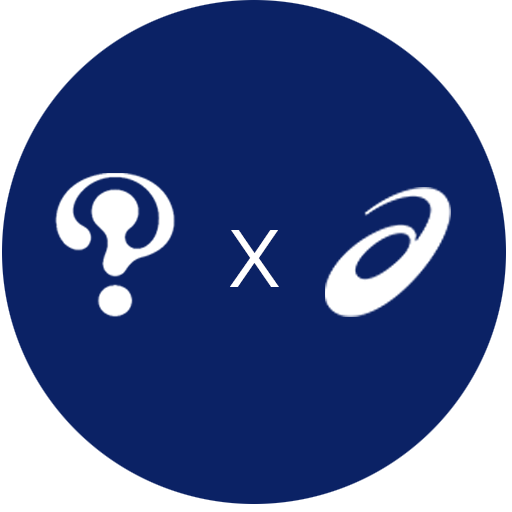
<style>
.page{position:relative;width:512px;height:512px;background:#0b2265}
.page>*{position:absolute;margin:0}
.t1{font:87px "Corbel";color:#ffffff}
</style>
<div class="page">
<p class="t1" style="left:230px;top:230px;width:49px;height:57px">X</p>
</div>
